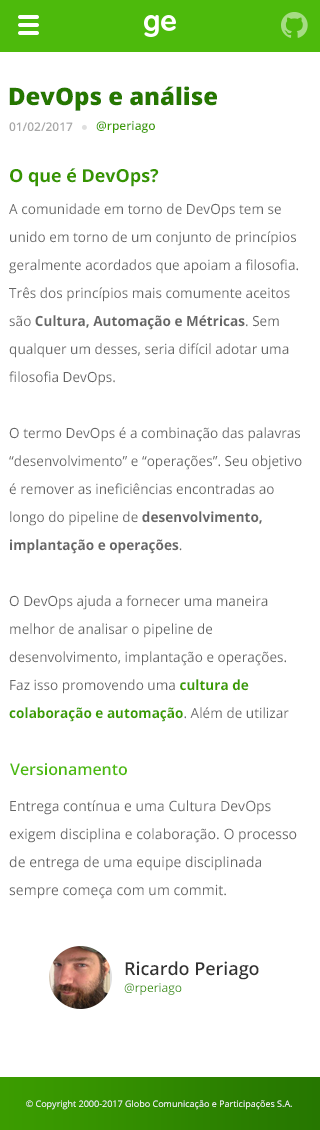
<style>
.page{position:relative;width:320px;height:1130px;background:#ffffff}
.page>*{position:absolute;margin:0}
.t1{font:24px "OpenSans-Extrabold";color:#267700}
.t2{font:12px "OpenSans-Semibold";color:#a7a7a7}
.t3{font:12px "OpenSans-Semibold";color:#3b9c00}
.t4{font:18px "OpenSans-Bold";color:#379500}
.t5{font:14px/28px "OpenSans";color:#666666;scale:0.97 1}
.t6{font:14px/28px "OpenSans-Bold";color:#666666;scale:0.97 1}
.t7{font:14px/28px "OpenSans-Bold";color:#3b9c00;scale:0.97 1}
.t8{font:16px "OpenSans-Semibold";color:#4dba0c}
.t9{font:14px/28px "OpenSans";color:#666666}
.t10{font:18px "OpenSans-Semibold";color:#333333}
.t11{font:12px "OpenSans";color:#359100}
.t12{font:9px "OpenSans";color:#ffffff}
</style>
<div class="page">
<p class="t1" style="left:9px;top:86px;width:208px;height:25px">DevOps e análise</p>
<p class="t2" style="left:9px;top:122px;width:64px;height:9px">01/02/2017</p>
<p class="t3" style="left:96px;top:121px;width:59px;height:12px">@rperiago</p>
<p class="t4" style="left:10px;top:168px;width:149px;height:19px">O que é DevOps?</p>
<p class="t5" style="left:9px;top:203px;width:293px;height:519px">A comunidade em torno de DevOps tem se unido em torno de um conjunto de princípios geralmente acordados que apoiam a filosofia. Três dos princípios mais comumente aceitos são <span class="t6">Cultura, Automação e Métricas</span>. Sem qualquer um desses, seria difícil adotar uma filosofia DevOps.<br><br>O termo DevOps é a combinação das palavras “desenvolvimento” e “operações”. Seu objetivo é remover as ineficiências encontradas ao longo do pipeline de <span class="t6">desenvolvimento, implantação e operações</span>.<br><br>O DevOps ajuda a fornecer uma maneira melhor de analisar o pipeline de desenvolvimento, implantação e operações. Faz isso promovendo uma <span class="t7">cultura de colaboração e automação</span>. Além de utilizar métricas de todos os dados úteis quanto possível. Trazendo assim uma melhor qualidade na entrega do projeto a ser desenvolvido.</p>
<p class="t8" style="left:10px;top:763px;width:117px;height:13px">Versionamento</p>
<p class="t9" style="left:9px;top:800px;width:288px;height:99px">Entrega contínua e uma Cultura DevOps exigem disciplina e colaboração. O processo de entrega de uma equipe disciplinada sempre começa com um commit.</p>
<p class="t10" style="left:125px;top:961px;width:134px;height:19px">Ricardo Periago</p>
<p class="t11" style="left:124px;top:983px;width:58px;height:12px">@rperiago</p>
<p class="t12" style="left:26px;top:1100px;width:266px;height:10px">© Copyright 2000-2017 Globo Comunicação e Participações S.A.</p>
</div>
